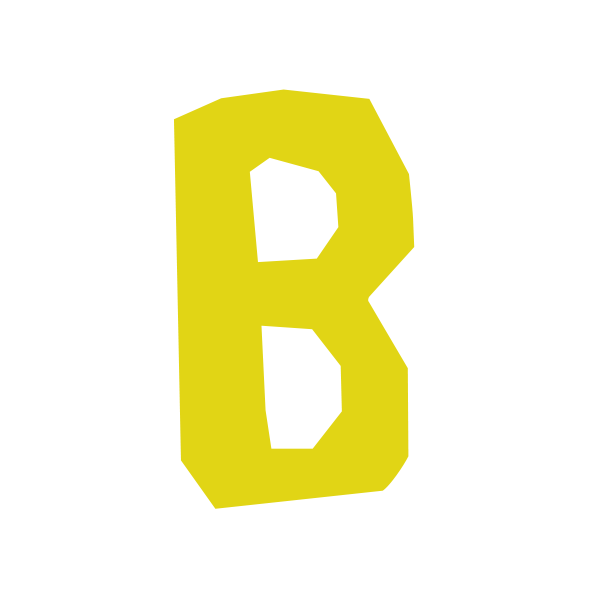
<style>
.page{position:relative;width:612px;height:612px;background:#ffffff}
.page>*{position:absolute;margin:0}
.t1{font:583px "DKSnippitySnap";letter-spacing:0.04em;color:#e1d515}
</style>
<div class="page">
<p class="t1" style="left:173px;top:89px;width:242px;height:420px">B</p>
</div>
